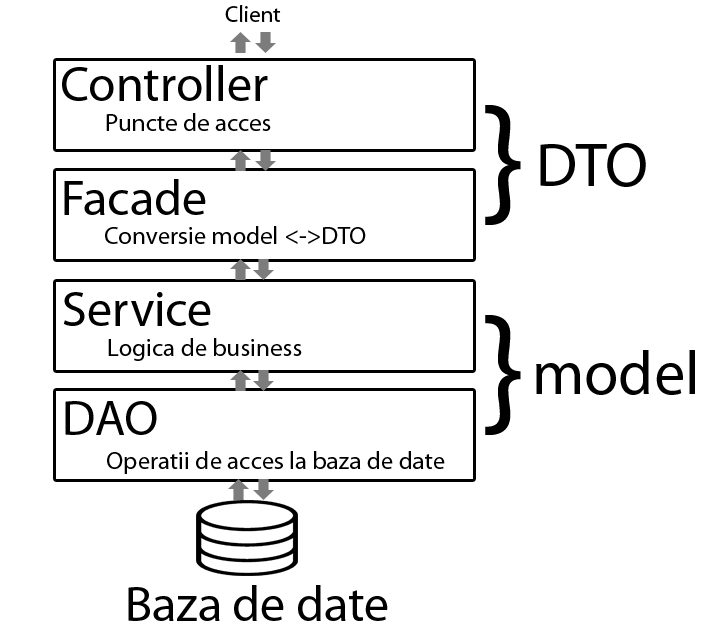
<style>
.page{position:relative;width:725px;height:633px;background:#ffffff}
.page>*{position:absolute;margin:0}
.t1{font:22.9px "MyriadPro-Regular";color:#000000}
.t2{font:50px "MyriadPro-Regular";color:#000000}
.t3{font:25px "MyriadPro-Regular";color:#000000}
.t4{font:150px "MyriadPro-Regular";color:#000000}
.t5{font:62.5px "MyriadPro-Regular";color:#000000}
</style>
<div class="page">
<p class="t1" style="left:225px;top:5px;width:56px;height:17px">Client</p>
<p class="t2" style="left:62px;top:65px;width:206px;height:36px">Controller</p>
<p class="t3" style="left:106px;top:113px;width:165px;height:18px">Puncte de acces</p>
<p class="t4" style="left:485px;top:105px;width:36px;height:120px">}</p>
<p class="t5" style="left:540px;top:143px;width:106px;height:44px">DTO</p>
<p class="t2" style="left:64px;top:179px;width:142px;height:36px">Facade</p>
<p class="t3" style="left:105px;top:226px;width:261px;height:18px">Conversie model &lt;-&gt;DTO</p>
<p class="t2" style="left:63px;top:292px;width:148px;height:34px">Service</p>
<p class="t4" style="left:485px;top:315px;width:36px;height:120px">}</p>
<p class="t3" style="left:108px;top:338px;width:194px;height:23px">Logica de business</p>
<p class="t5" style="left:536px;top:350px;width:159px;height:45px">model</p>
<p class="t2" style="left:65px;top:401px;width:92px;height:34px">DAO</p>
<p class="t3" style="left:107px;top:451px;width:338px;height:23px">Operatii de acces la baza de date</p>
<p class="t2" style="left:128px;top:585px;width:260px;height:36px">Baza de date</p>
</div>
